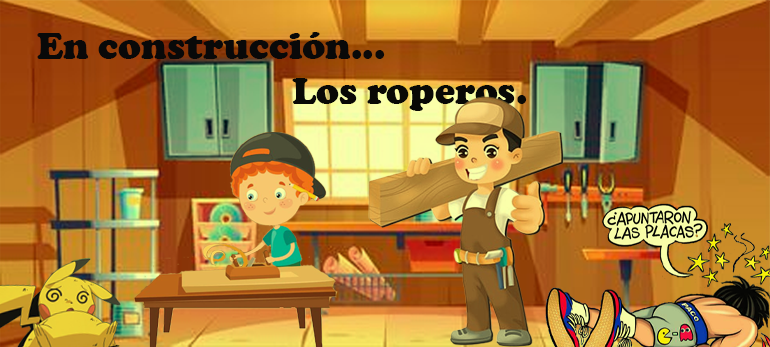
<style>
.page{position:relative;width:770px;height:347px}
.page>*{position:absolute;margin:0}
.t1{font:38px "CooperBlack";color:#090909}
</style>
<div class="page">
<p class="t1" style="left:37px;top:32px;width:348px;height:27px">En construcción...</p>
<p class="t1" style="left:292px;top:78px;width:235px;height:33px">Los roperos.</p>
</div>
